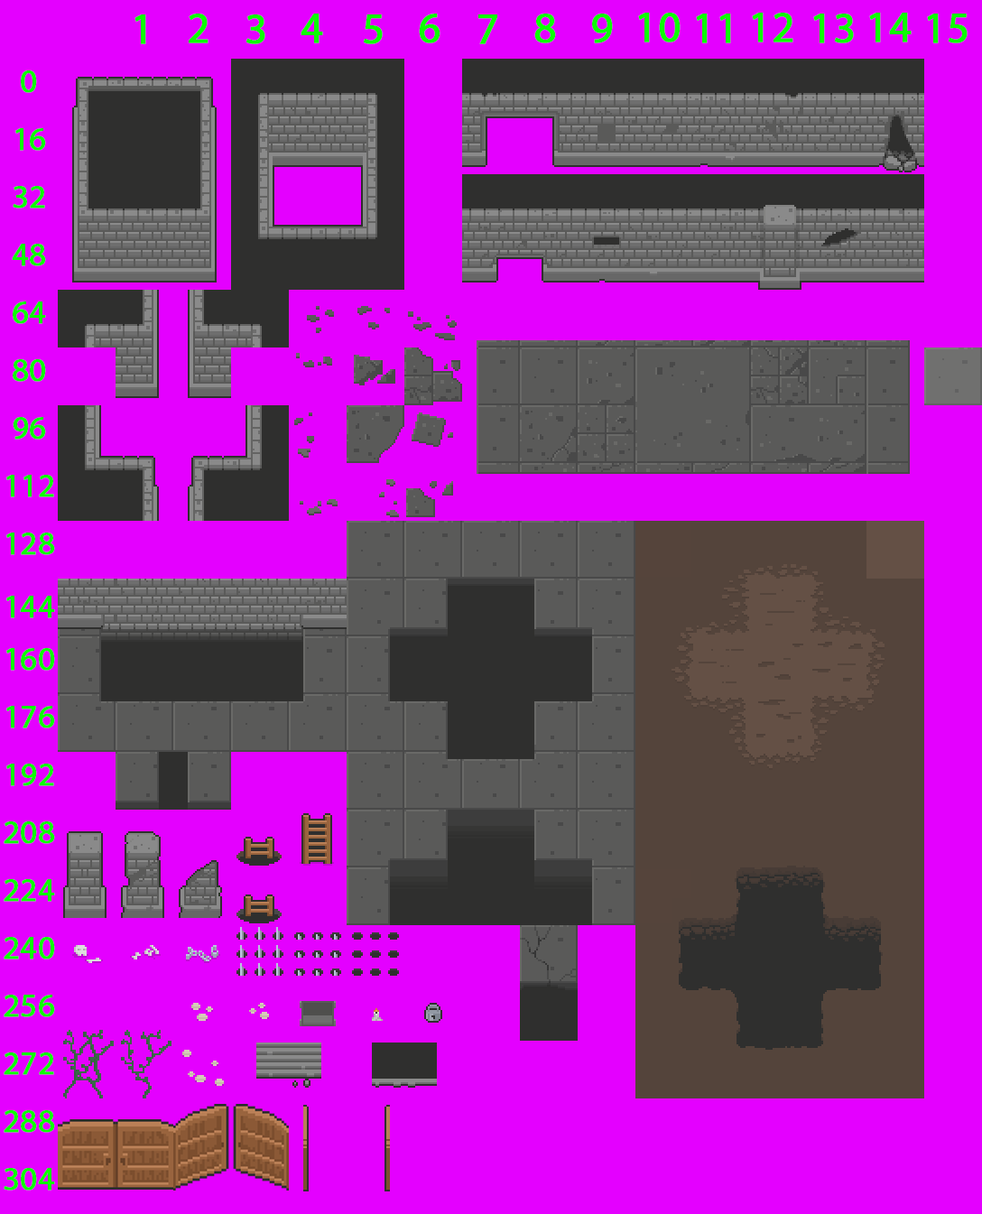
<style>
.page{position:relative;width:982px;height:1214px;background:#e400ff}
.page>*{position:absolute;margin:0}
.t1{font:43.3px "MyriadPro-Regular";color:#0cff00;font-weight:bold}
.t2{font:32.5px "MyriadPro-Regular";color:#0cff00;font-weight:bold}
</style>
<div class="page">
<p class="t1" style="left:135px;top:14px;width:11px;height:30px">1</p>
<p class="t1" style="left:189px;top:14px;width:20px;height:29px">2</p>
<p class="t1" style="left:246px;top:14px;width:19px;height:30px">3</p>
<p class="t1" style="left:301px;top:14px;width:22px;height:29px">4</p>
<p class="t1" style="left:364px;top:14px;width:19px;height:30px">5</p>
<p class="t1" style="left:419px;top:14px;width:22px;height:29px">6</p>
<p class="t1" style="left:478px;top:14px;width:19px;height:30px">7</p>
<p class="t1" style="left:534px;top:14px;width:22px;height:29px">8</p>
<p class="t1" style="left:592px;top:14px;width:21px;height:29px">9</p>
<p class="t1" style="left:638px;top:13px;width:43px;height:29px">10</p>
<p class="t1" style="left:696px;top:14px;width:35px;height:29px">11</p>
<p class="t1" style="left:752px;top:13px;width:41px;height:29px">12</p>
<p class="t1" style="left:813px;top:14px;width:41px;height:29px">13</p>
<p class="t1" style="left:869px;top:13px;width:43px;height:29px">14</p>
<p class="t1" style="left:927px;top:14px;width:41px;height:29px">15</p>
<p class="t2" style="left:21px;top:70px;width:16px;height:23px">0</p>
<p class="t2" style="left:15px;top:128px;width:31px;height:23px">16</p>
<p class="t2" style="left:13px;top:186px;width:32px;height:23px">32</p>
<p class="t2" style="left:12px;top:244px;width:34px;height:22px">48</p>
<p class="t2" style="left:13px;top:302px;width:33px;height:22px">64</p>
<p class="t2" style="left:13px;top:359px;width:33px;height:23px">80</p>
<p class="t2" style="left:13px;top:417px;width:33px;height:23px">96</p>
<p class="t2" style="left:6px;top:475px;width:48px;height:22px">112</p>
<p class="t2" style="left:6px;top:533px;width:49px;height:22px">128</p>
<p class="t2" style="left:6px;top:596px;width:49px;height:22px">144</p>
<p class="t2" style="left:6px;top:648px;width:49px;height:23px">160</p>
<p class="t2" style="left:6px;top:706px;width:49px;height:22px">176</p>
<p class="t2" style="left:6px;top:764px;width:48px;height:22px">192</p>
<p class="t2" style="left:4px;top:821px;width:51px;height:23px">208</p>
<p class="t2" style="left:4px;top:879px;width:51px;height:23px">224</p>
<p class="t2" style="left:4px;top:937px;width:51px;height:23px">240</p>
<p class="t2" style="left:4px;top:995px;width:51px;height:22px">256</p>
<p class="t2" style="left:4px;top:1053px;width:50px;height:22px">272</p>
<p class="t2" style="left:4px;top:1110px;width:51px;height:23px">288</p>
<p class="t2" style="left:4px;top:1168px;width:51px;height:23px">304</p>
</div>
